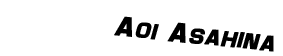
<style>
.page{position:relative;width:283px;height:56px;background:#ffffff}
.page>*{position:absolute;margin:0}
.t1{font:28px "Maximus";color:#000000;font-weight:bold;font-style:italic}
</style>
<div class="page">
<p class="t1" style="left:114px;top:16px;width:160px;height:36px;rotate:6deg">Aoi Asahina</p>
</div>
